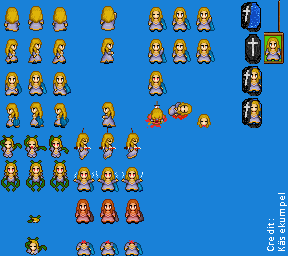
<style>
.page{position:relative;width:288px;height:256px;background:#1981d8}
.page>*{position:absolute;margin:0}
.t1{font:11px/11px "Calibri";letter-spacing:0.03em;color:#ffffff}
</style>
<div class="page">
<p class="t1" style="left:267px;top:193px;width:20px;height:58px;rotate:-90deg">Credit: <br>Käsekumpel</p>
</div>
